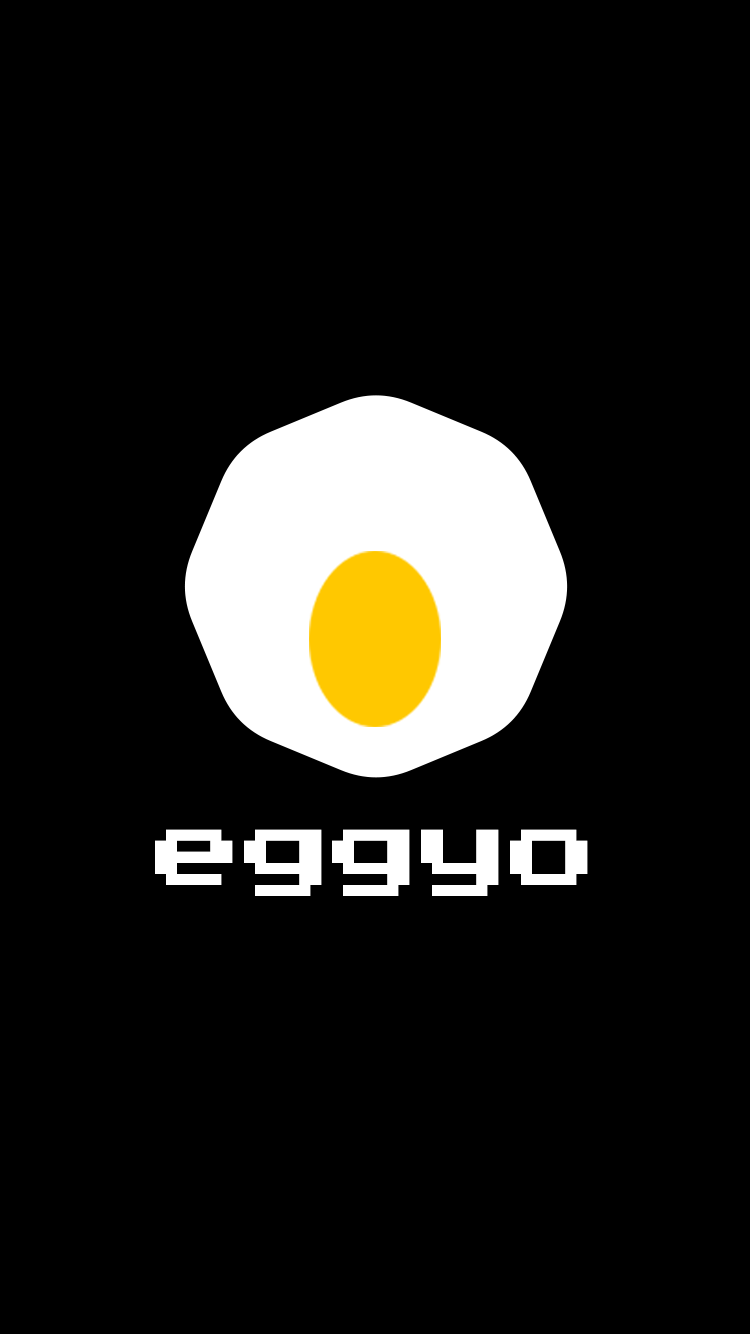
<style>
.page{position:relative;width:750px;height:1334px;background:#000000}
.page>*{position:absolute;margin:0}
.t1{font:88.2px "PressStart2P";color:#ffffff}
</style>
<div class="page">
<p class="t1" style="left:155px;top:829px;width:433px;height:67px">eggyo</p>
</div>
